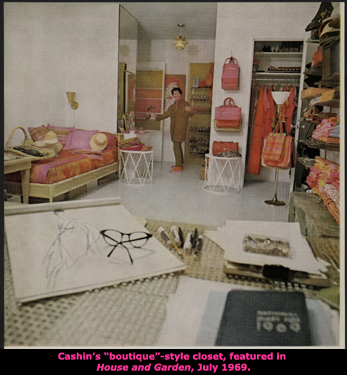
<style>
.page{position:relative;width:347px;height:375px}
.page>*{position:absolute;margin:0}
.t1{font:9.2px "Verdana-Bold";color:#ff3399}
.t2{font:9.2px "Verdana-BoldItalic";color:#ff3399}
</style>
<div class="page">
<p class="t1" style="left:58px;top:352px;width:228px;height:21px;text-align:center">Cashin’s “boutique”-style closet, featured in<br> <span class="t2">House and Garden</span>, July 1969.</p>
</div>
